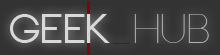
<style>
.page{position:relative;width:220px;height:55px;background:#333333}
.page>*{position:absolute;margin:0}
.t1{font:41px "Neou-Bold";color:#d9d9d9}
.t2{font:41px "Neou-Thin";color:#800409}
.t3{font:41px "Neou-Thin";color:#b2b2b2}
</style>
<div class="page">
<p class="t1" style="left:10px;top:14px;width:199px;height:30px">Geek<span class="t2">_</span><span class="t3">Hub</span></p>
</div>
